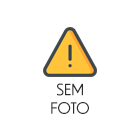
<style>
.page{position:relative;width:140px;height:140px;background:#ffffff}
.page>*{position:absolute;margin:0}
.t1{font:15.3px "DunbarTall-Book";color:#2f2d2b;text-transform:uppercase}
</style>
<div class="page">
<p class="t1" style="left:51px;top:83px;width:38px;height:31px;text-align:center">SEM<br>FOTO</p>
</div>
